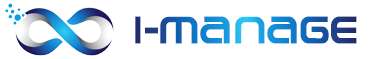
<style>
.page{position:relative;width:390px;height:59px;background:#ffffff}
.page>*{position:absolute;margin:0}
.t1{font:42.1px "BirdmanBold";font-weight:bold}
.t2{font:42.1px "Helvetica-Bold";font-weight:bold}
</style>
<div class="page">
<p class="t1" style="left:135px;top:16px;width:222px;height:28px">I<span class="t2">-</span>MANAGE</p>
</div>
